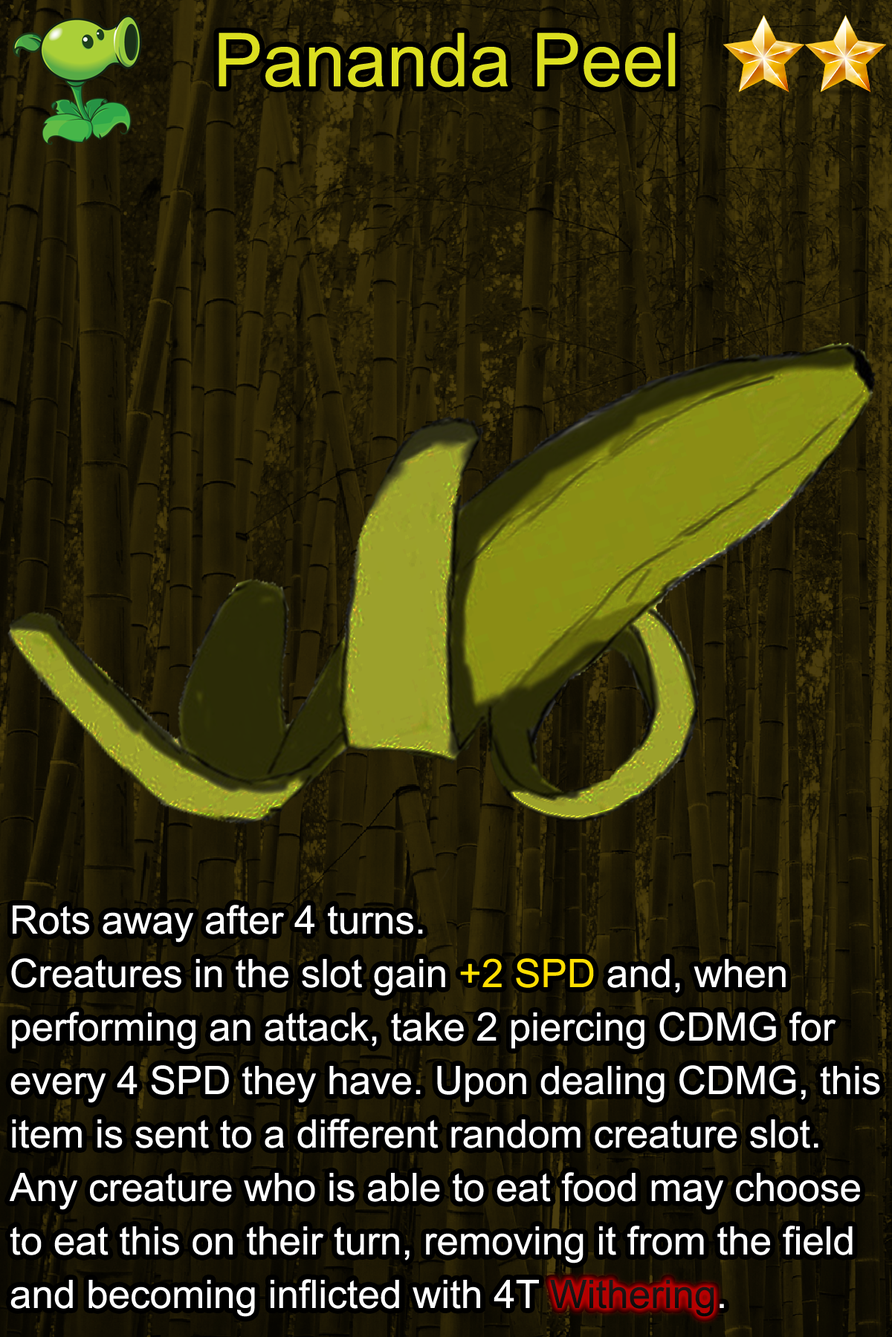
<style>
.page{position:relative;width:892px;height:1337px}
.page>*{position:absolute;margin:0}
.t1{font:74.3px "ArialMT";color:#dcdf20}
.t2{font:39.4px/53.5px "ArialMT";color:#ffffff}
.t3{font:39.4px/53.5px "ArialMT";color:#ffde00}
.t4{font:39.4px/53.5px "ArialMT";color:#1f1919}
</style>
<div class="page">
<p class="t1" style="left:218px;top:33px;width:457px;height:55px">Pananda Peel</p>
<p class="t2" style="left:9px;top:905px;width:871px;height:412px">Rots away after 4 turns.<br>Creatures in the slot gain <span class="t3">+2 SPD</span> and, when performing an attack, take 2 piercing CDMG for every 4 SPD they have. Upon dealing CDMG, this item is sent to a different random creature slot.<br>Any creature who is able to eat food may choose to eat this on their turn, removing it from the field and becoming inflicted with 4T <span class="t4">Withering</span>.</p>
</div>
